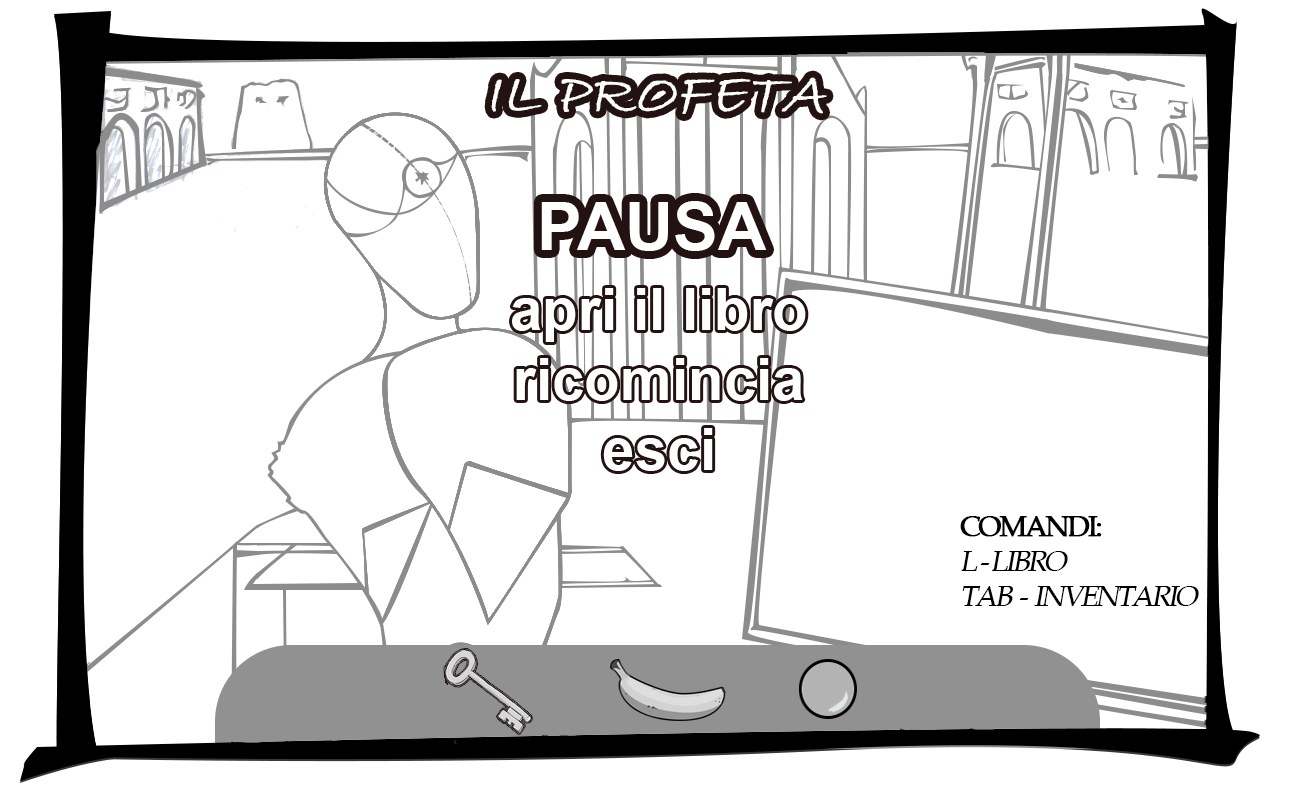
<style>
.page{position:relative;width:1300px;height:800px;background:#ffffff}
.page>*{position:absolute;margin:0}
.t1{font:58.3px "BradleyHandITC";color:#ffffff;text-transform:uppercase;font-weight:bold;font-style:italic}
.t2{font:66.7px "Arial-BoldMT";color:#ffffff}
.t3{font:29.2px "BookAntiqua";letter-spacing:-0.1em;color:#000000;text-transform:uppercase;font-style:italic}
.t4{font:29.2px "BookAntiqua";letter-spacing:-0.1em;color:#000000;text-transform:uppercase;font-weight:bold}
</style>
<div class="page">
<p class="t1" style="left:491px;top:77px;width:336px;height:37px">il profeta</p>
<p class="t2" style="left:541px;top:201px;width:226px;height:50px">PAUSA</p>
<p class="t3" style="left:960px;top:516px;width:239px;height:90px"><span class="t4">comandi:<br></span>L - libro<br>TAB  -  inventario</p>
</div>
